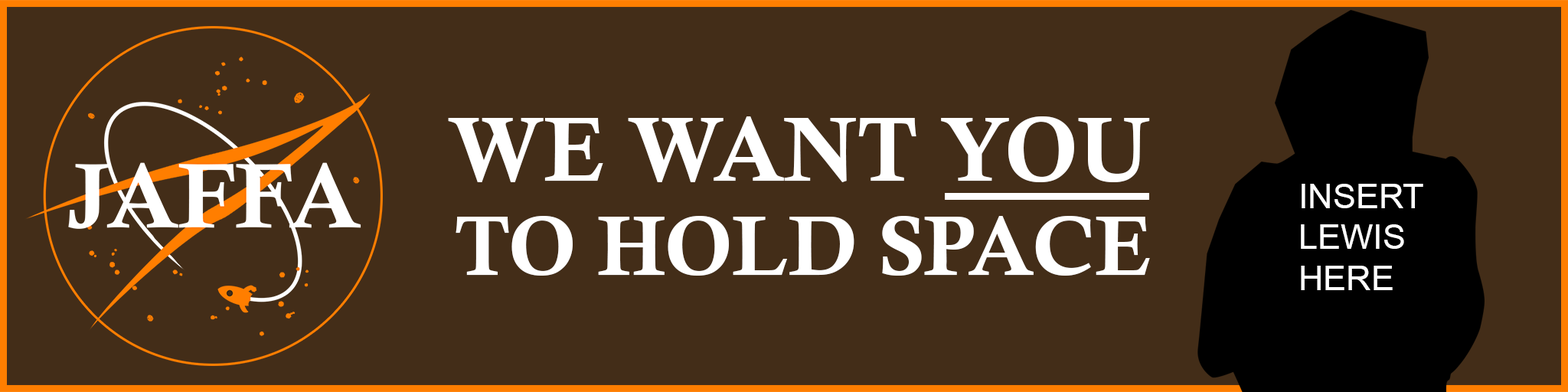
<style>
.page{position:relative;width:1568px;height:392px;background:#432d18}
.page>*{position:absolute;margin:0}
.t1{font:90.5px "CalisMTBol";color:#ffffff;text-transform:uppercase}
.t2{font:34.3px "ArialMT";color:#ffffff;text-transform:uppercase}
.t3{font:83.5px "CalisMTBol";color:#ffffff;text-transform:uppercase}
</style>
<div class="page">
<p class="t1" style="left:448px;top:116px;width:702px;height:66px">We want you</p>
<p class="t2" style="left:1301px;top:184px;width:122px;height:106px">INSERT<br>LEWIS <br>HERE</p>
<p class="t3" style="left:456px;top:216px;width:694px;height:60px">to hold space</p>
</div>
